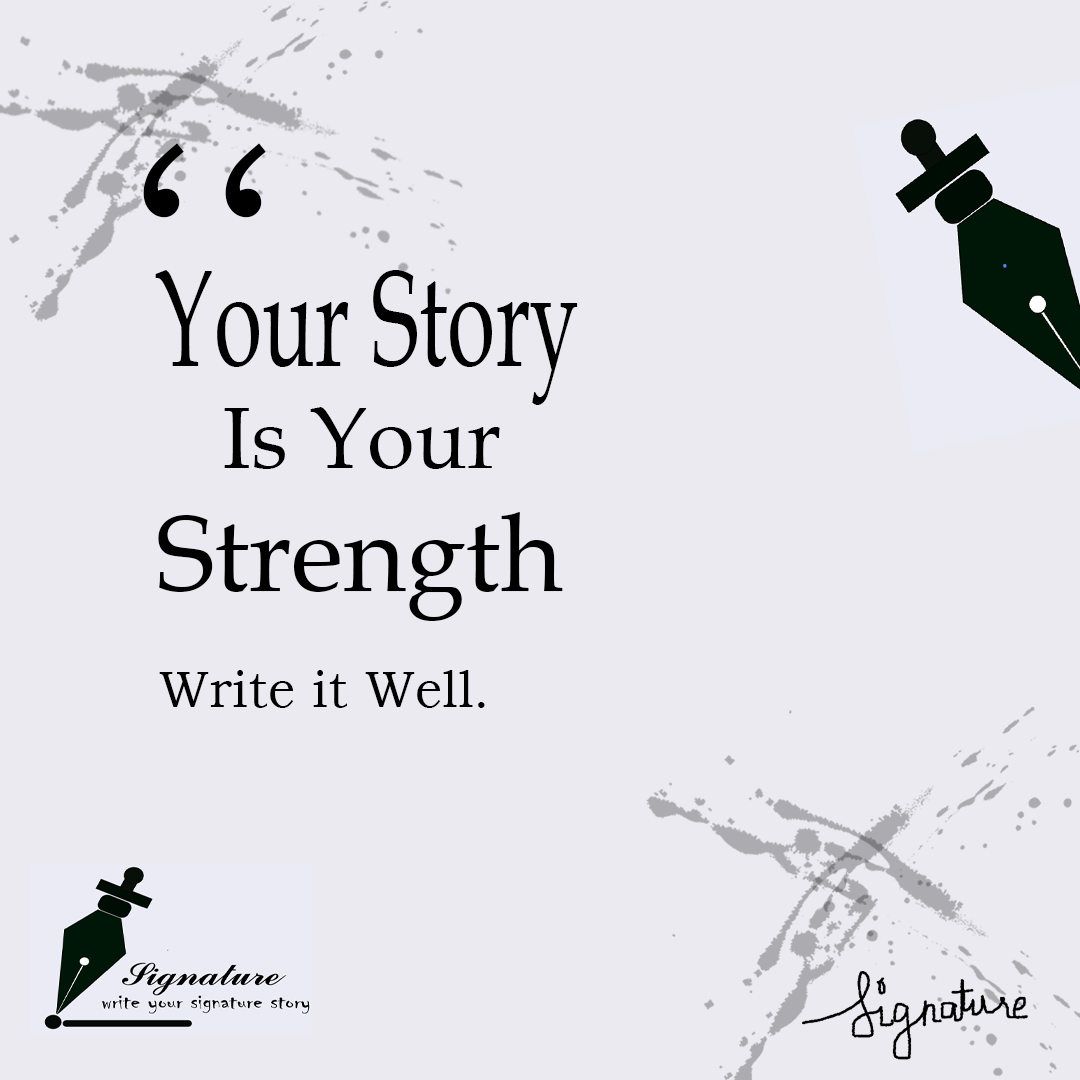
<style>
.page{position:relative;width:1080px;height:1080px;background:#eaeaf0}
.page>*{position:absolute;margin:0}
.t1{font:256.9px "BookmanOldStyle";color:#000000}
.t2{font:137.8px "BookAntiqua";color:#000000;scale:0.64 1}
.t3{font:86.6px "BookAntiqua";color:#000000}
.t4{font:107.5px "BookAntiqua";color:#000000}
.t5{font:52.4px "BookmanOldStyle";color:#000000}
</style>
<div class="page">
<p class="t1" style="left:143px;top:143px;width:123px;height:75px;rotate:-180deg">,,</p>
<p class="t2" style="left:155px;top:270px;width:423px;height:135px">Your Story</p>
<p class="t3" style="left:224px;top:407px;width:276px;height:62px">Is Your</p>
<p class="t4" style="left:158px;top:512px;width:405px;height:109px">Strength</p>
<p class="t5" style="left:159px;top:670px;width:326px;height:38px">Write it Well.</p>
</div>
